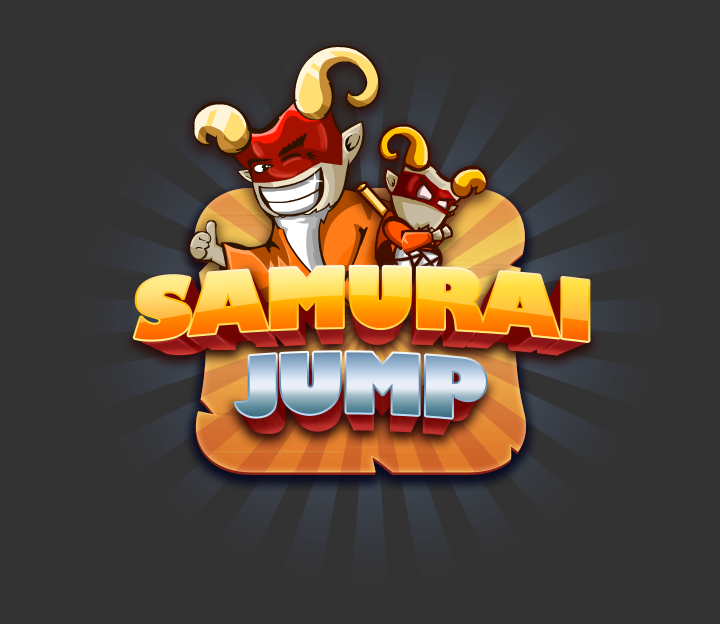
<style>
.page{position:relative;width:720px;height:624px;background:#333333}
.page>*{position:absolute;margin:0}
.t1{font:80px "GillSans-UltraBold";letter-spacing:-0.04em}
.t2{font:80px "GillSans-UltraBold";letter-spacing:-0.06em}
</style>
<div class="page">
<p class="t1" style="left:134px;top:266px;width:455px;height:75px">SAMURAI</p>
<p class="t2" style="left:235px;top:352px;width:251px;height:66px">JUMP</p>
</div>
